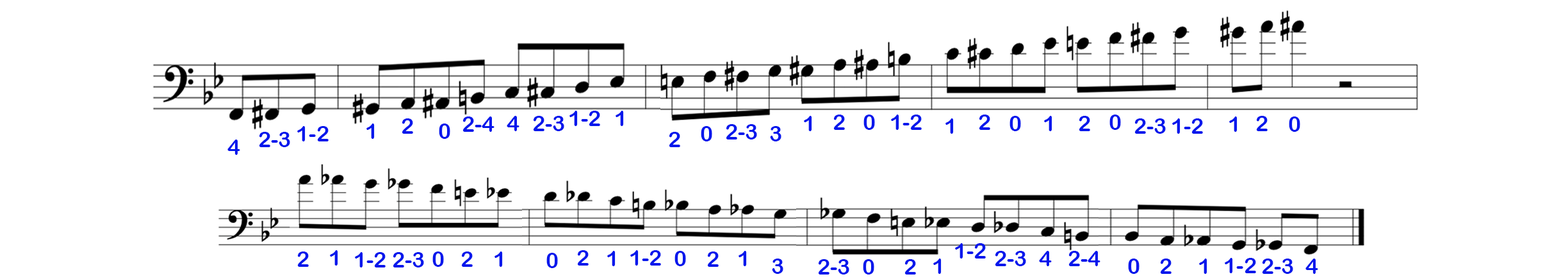
<style>
.page{position:relative;width:1568px;height:279px;background:#ffffff}
.page>*{position:absolute;margin:0}
.t1{font:21.8px "ArialRoundedMTBold";color:#0417ec}
</style>
<div class="page">
<p class="t1" style="left:569px;top:111px;width:31px;height:15px">1-2</p>
<p class="t1" style="left:616px;top:111px;width:8px;height:15px">1</p>
<p class="t1" style="left:366px;top:124px;width:9px;height:15px">1</p>
<p class="t1" style="left:402px;top:118px;width:11px;height:16px">2</p>
<p class="t1" style="left:439px;top:124px;width:11px;height:15px">0</p>
<p class="t1" style="left:462px;top:117px;width:32px;height:15px">2-4</p>
<p class="t1" style="left:507px;top:116px;width:12px;height:15px">4</p>
<p class="t1" style="left:533px;top:116px;width:31px;height:15px">2-3</p>
<p class="t1" style="left:726px;top:124px;width:31px;height:16px">2-3</p>
<p class="t1" style="left:804px;top:116px;width:8px;height:15px">1</p>
<p class="t1" style="left:833px;top:115px;width:12px;height:15px">2</p>
<p class="t1" style="left:863px;top:115px;width:12px;height:15px">0</p>
<p class="t1" style="left:891px;top:115px;width:31px;height:15px">1-2</p>
<p class="t1" style="left:945px;top:118px;width:9px;height:16px">1</p>
<p class="t1" style="left:979px;top:115px;width:11px;height:15px">2</p>
<p class="t1" style="left:1009px;top:116px;width:12px;height:15px">0</p>
<p class="t1" style="left:1044px;top:116px;width:8px;height:15px">1</p>
<p class="t1" style="left:1079px;top:116px;width:11px;height:15px">2</p>
<p class="t1" style="left:1109px;top:115px;width:12px;height:15px">0</p>
<p class="t1" style="left:1134px;top:118px;width:32px;height:16px">2-3</p>
<p class="t1" style="left:1172px;top:118px;width:31px;height:16px">1-2</p>
<p class="t1" style="left:1229px;top:117px;width:8px;height:15px">1</p>
<p class="t1" style="left:1256px;top:116px;width:12px;height:15px">2</p>
<p class="t1" style="left:1289px;top:117px;width:11px;height:15px">0</p>
<p class="t1" style="left:259px;top:132px;width:31px;height:15px">2-3</p>
<p class="t1" style="left:297px;top:126px;width:32px;height:16px">1-2</p>
<p class="t1" style="left:669px;top:132px;width:11px;height:15px">2</p>
<p class="t1" style="left:701px;top:126px;width:11px;height:16px">0</p>
<p class="t1" style="left:770px;top:126px;width:11px;height:16px">3</p>
<p class="t1" style="left:227px;top:140px;width:13px;height:15px">4</p>
<p class="t1" style="left:955px;top:243px;width:31px;height:16px">1-2</p>
<p class="t1" style="left:297px;top:252px;width:12px;height:15px">2</p>
<p class="t1" style="left:330px;top:250px;width:8px;height:16px">1</p>
<p class="t1" style="left:355px;top:252px;width:31px;height:16px">1-2</p>
<p class="t1" style="left:393px;top:252px;width:31px;height:16px">2-3</p>
<p class="t1" style="left:432px;top:252px;width:12px;height:15px">0</p>
<p class="t1" style="left:461px;top:252px;width:12px;height:15px">2</p>
<p class="t1" style="left:494px;top:252px;width:9px;height:15px">1</p>
<p class="t1" style="left:546px;top:253px;width:12px;height:15px">0</p>
<p class="t1" style="left:577px;top:250px;width:12px;height:16px">2</p>
<p class="t1" style="left:607px;top:251px;width:9px;height:15px">1</p>
<p class="t1" style="left:630px;top:250px;width:31px;height:16px">1-2</p>
<p class="t1" style="left:674px;top:251px;width:12px;height:15px">0</p>
<p class="t1" style="left:707px;top:252px;width:12px;height:15px">2</p>
<p class="t1" style="left:739px;top:251px;width:8px;height:15px">1</p>
<p class="t1" style="left:995px;top:251px;width:31px;height:15px">2-3</p>
<p class="t1" style="left:1039px;top:251px;width:13px;height:15px">4</p>
<p class="t1" style="left:1068px;top:251px;width:32px;height:15px">2-4</p>
<p class="t1" style="left:772px;top:259px;width:11px;height:15px">3</p>
<p class="t1" style="left:818px;top:259px;width:31px;height:16px">2-3</p>
<p class="t1" style="left:863px;top:259px;width:11px;height:16px">0</p>
<p class="t1" style="left:904px;top:259px;width:12px;height:16px">2</p>
<p class="t1" style="left:933px;top:259px;width:9px;height:15px">1</p>
<p class="t1" style="left:1128px;top:259px;width:11px;height:15px">0</p>
<p class="t1" style="left:1160px;top:259px;width:12px;height:15px">2</p>
<p class="t1" style="left:1199px;top:259px;width:8px;height:15px">1</p>
<p class="t1" style="left:1225px;top:258px;width:31px;height:16px">1-2</p>
<p class="t1" style="left:1262px;top:259px;width:31px;height:15px">2-3</p>
<p class="t1" style="left:1305px;top:259px;width:13px;height:15px">4</p>
</div>
